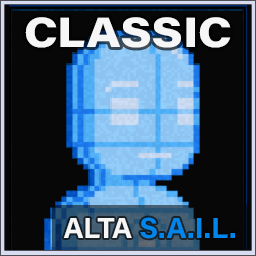
<style>
.page{position:relative;width:256px;height:256px;background:#070707}
.page>*{position:absolute;margin:0}
.t1{font:41.7px "AcuminConcept_760.000wght_112.000wdth";color:#f6f6f6}
.t2{font:29.2px "AcuminConcept-Bold";color:#0085eb}
.t3{font:29.2px "AcuminConcept-Bold";color:#f6f6f6}
</style>
<div class="page">
<p class="t1" style="left:25px;top:17px;width:206px;height:31px">CLASSIC</p>
<p class="t2" style="left:63px;top:217px;width:172px;height:22px"><span class="t3">ALTA </span>S.A.I.L.</p>
</div>
